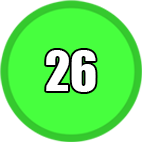
<style>
.page{position:relative;width:142px;height:142px;background:#47ff3e}
.page>*{position:absolute;margin:0}
.t1{font:50px "Impact";color:#ffffff}
</style>
<div class="page">
<p class="t1" style="left:46px;top:50px;width:50px;height:42px">26</p>
</div>
